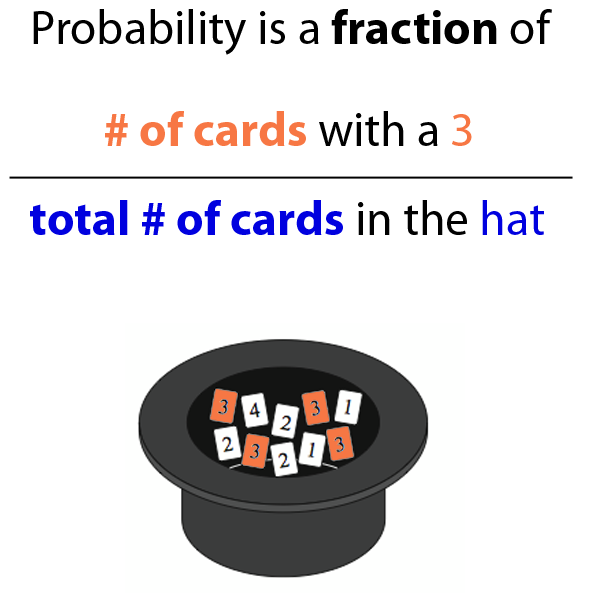
<style>
.page{position:relative;width:590px;height:593px;background:#ffffff}
.page>*{position:absolute;margin:0}
.t1{font:48px "MyriadPro-Regular";color:#000000}
.t2{font:48px "MyriadPro-Bold";color:#000000}
.t3{font:48px "MyriadPro-Bold";color:#f77744}
.t4{font:48px "MyriadPro-Regular";color:#f77744}
.t5{font:48px "MyriadPro-Bold";color:#0101df}
.t6{font:48px "MyriadPro-Regular";color:#010101}
.t7{font:48px "MyriadPro-Regular";color:#0101df}
</style>
<div class="page">
<p class="t1" style="left:33px;top:9px;width:519px;height:46px">Probability is a <span class="t2">fraction</span> of</p>
<p class="t3" style="left:105px;top:111px;width:367px;height:35px"># of cards <span class="t1">with a </span><span class="t4">3</span></p>
<p class="t5" style="left:30px;top:200px;width:514px;height:35px">total # of cards <span class="t6">in the</span><span class="t7"> hat</span></p>
</div>
